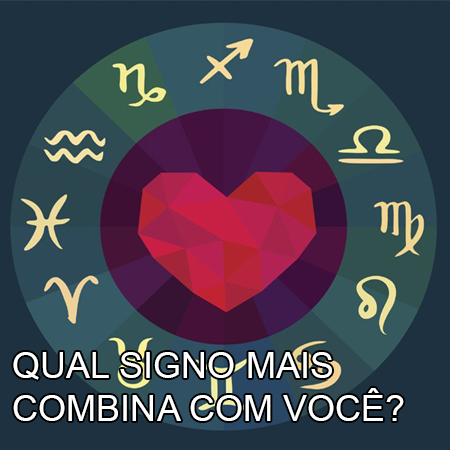
<style>
.page{position:relative;width:450px;height:450px;background:#1e3140}
.page>*{position:absolute;margin:0}
.t1{font:36.1px "ArialMT";color:#ffffff}
</style>
<div class="page">
<p class="t1" style="left:13px;top:352px;width:391px;height:69px">QUAL SIGNO MAIS <br>COMBINA COM VOCÊ?</p>
</div>
